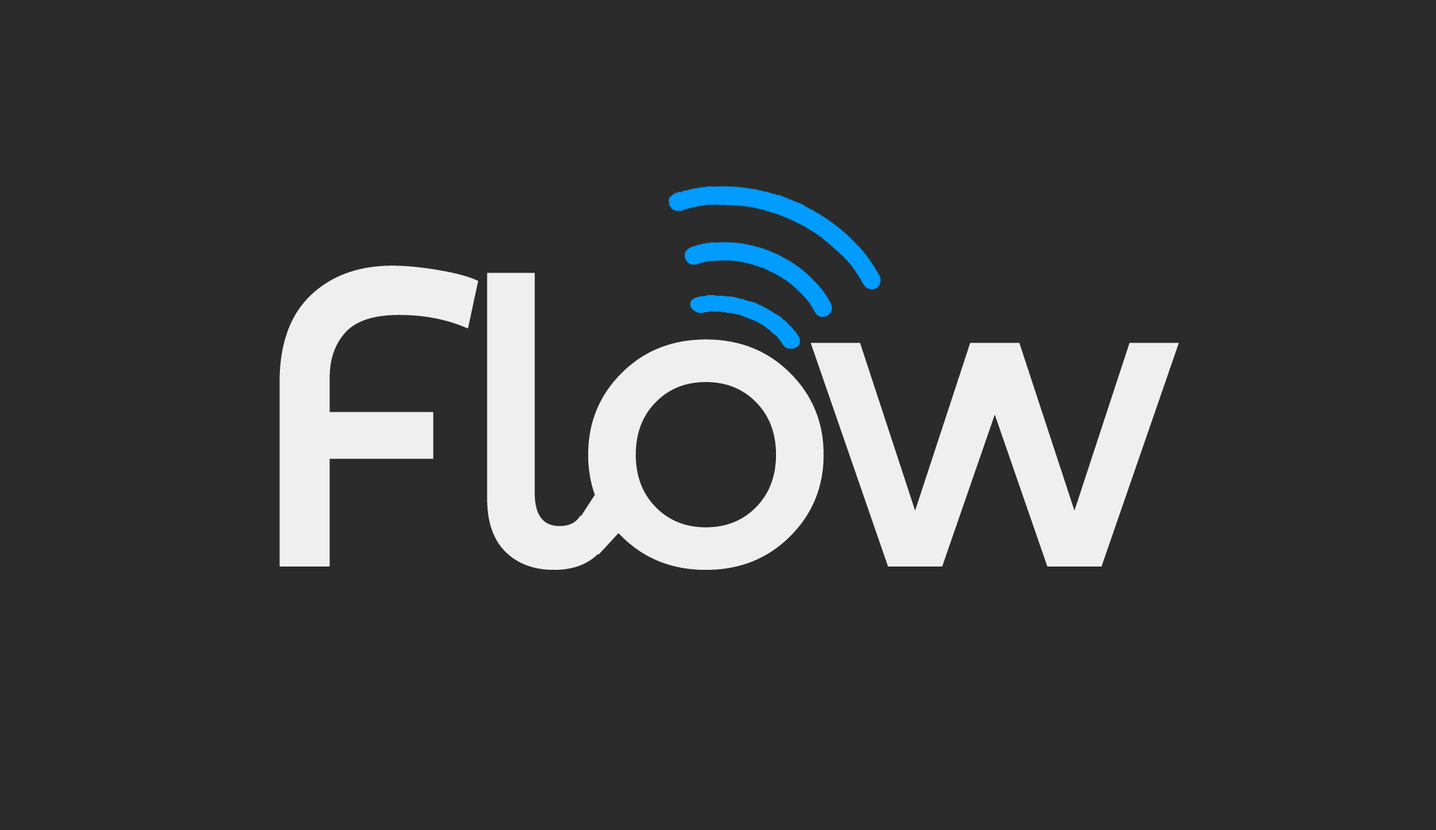
<style>
.page{position:relative;width:1436px;height:830px;background:#2b2b2b}
.page>*{position:absolute;margin:0}
.t1{font:419.4px "MontserratAlternates-Regular";letter-spacing:-0.1em;color:#efefef;font-weight:bold}
.t2{font:419.4px "MontserratAlternates-Regular";letter-spacing:-0.12em;color:#efefef;font-weight:bold}
</style>
<div class="page">
<p class="t1" style="left:279px;top:266px;width:900px;height:304px">Fl<span class="t2">o</span>w</p>
</div>
